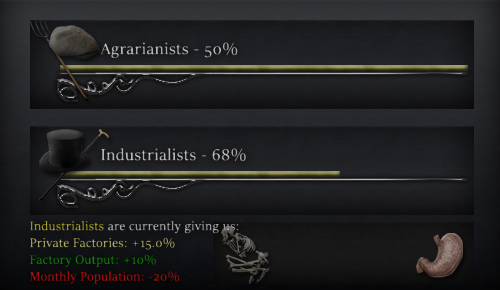
<style>
.page{position:relative;width:500px;height:290px}
.page>*{position:absolute;margin:0}
.t1{font:18px "SitkaBanner";letter-spacing:0.025em;color:#aeaeae}
.t2{font:18px "SitkaBanner";letter-spacing:0.025em;color:#b4b4b4}
.t3{font:14px "SitkaBanner";letter-spacing:0.025em}
</style>
<div class="page">
<p class="t1" style="left:100px;top:42px;width:138px;height:16px">Agrarianists - 50%</p>
<p class="t2" style="left:101px;top:148px;width:145px;height:14px">Industrialists - 68%</p>
<p class="t3" style="left:30px;top:220px;width:209px;height:64px">Industrialists are currently giving us:<br>Private Factories: +15.0%<br>Factory Output: +10%<br>Monthly Population: -20%</p>
</div>
